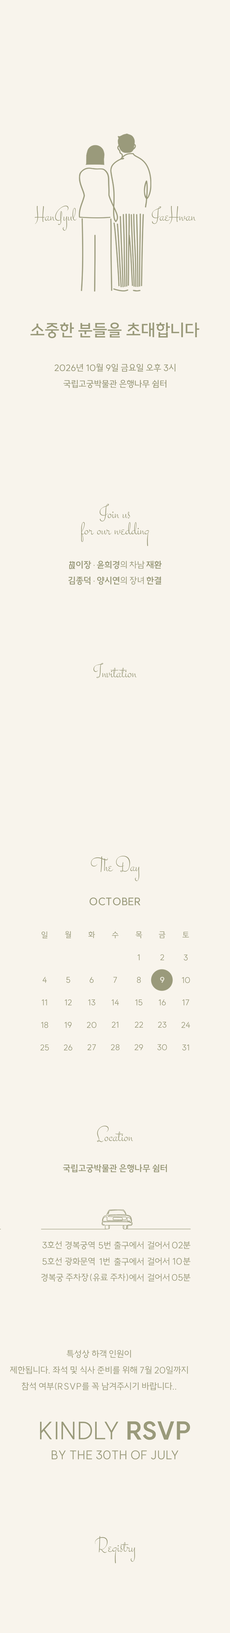
<style>
.page{position:relative;width:230px;height:1633px;background:#f8f4ec}
.page>*{position:absolute;margin:0}
.t1{font:20.3px "Stalemate-Regular";color:#9a9a7b}
.t2{font:17.1px "SUITE-SemiBold";color:#9a9a7b}
.t3{font:9px/16.2px "SUITE-Medium";color:#9a9a7b}
.t4{font:20.3px/16.2px "Stalemate-Regular";color:#9a9a7b}
.t5{font:9px/15.8px "SUITE-Bold";color:#9a9a7b}
.t6{font:8.6px/15.8px "WD-XLLubrifontSC-Regular";color:#9a9a7b}
.t7{font:7.2px/15.8px "WD-XLLubrifontSC-Regular";color:#9a9a7b}
.t8{font:9px/15.8px "SUITE-Regular";color:#9a9a7b}
.t9{font:10.4px "SUITE-SemiBold";color:#9a9a7b}
.t10{font:8.1px/22.5px "SUITE-Regular";color:#9a9a7b}
.t11{font:8.1px/22.5px "SUITE-ExtraBold";color:#9a9a7b}
.t12{font:9px "SUITE-Bold";color:#9a9a7b}
.t13{font:9px/16.2px "SUITE-Regular";color:#9a9a7b}
.t14{font:9px "SUITE-Regular";color:#9a9a7b}
.t15{font:24.3px "SUITE-Light";color:#9a9a7b}
.t16{font:24.3px "SUITE-ExtraBold";color:#9a9a7b}
.t17{font:12.2px "SUITE-Regular";color:#9a9a7b}
</style>
<div class="page">
<p class="t1" style="left:34px;top:206px;width:161px;height:25px">HanGyul                      JaeHwan</p>
<p class="t2" style="left:30px;top:322px;width:169px;height:16px">소중한 분들을 초대합니다</p>
<p class="t3" style="left:54px;top:364px;width:121px;height:24px;text-align:center">2026년 10월 9일 금요일 오후 3시<br>국립고궁박물관 은행나무 쉼터</p>
<p class="t4" style="left:81px;top:504px;width:68px;height:42px;text-align:center">Join us<br>for our wedding</p>
<p class="t5" style="left:68px;top:561px;width:93px;height:24px;text-align:right"><span class="t6">故 </span>이장<span class="t7">・</span>윤희경<span class="t8">의 차남 </span>재환<br>김종덕<span class="t7">・</span>양시연<span class="t8">의 장녀 </span>한결</p>
<p class="t1" style="left:93px;top:663px;width:43px;height:15px">Invitation</p>
<p class="t1" style="left:91px;top:856px;width:48px;height:25px">The Day</p>
<p class="t9" style="left:89px;top:897px;width:51px;height:8px">OCTOBER</p>
<p class="t10" style="left:40px;top:931px;width:9px;height:119px;text-align:center">일<br><br>4<br>11<br>18<br>25</p>
<p class="t10" style="left:64px;top:931px;width:8px;height:119px;text-align:center">월<br><br>5<br>12<br>19<br>26</p>
<p class="t10" style="left:87px;top:931px;width:9px;height:119px;text-align:center">화<br><br>6<br>13<br>20<br>27</p>
<p class="t10" style="left:111px;top:931px;width:8px;height:119px;text-align:center">수<br><br>7<br>14<br>21<br>28</p>
<p class="t10" style="left:134px;top:931px;width:9px;height:119px;text-align:center">목<br>1<br>8<br>15<br>22<br>29</p>
<p class="t10" style="left:157px;top:931px;width:10px;height:119px;text-align:center">금<br>2<br><span class="t11">9<br></span>16<br>23<br>30</p>
<p class="t10" style="left:181px;top:932px;width:9px;height:118px;text-align:center">토<br>3<br>10<br>17<br>24<br>31</p>
<p class="t1" style="left:97px;top:1125px;width:36px;height:17px">Location</p>
<p class="t12" style="left:63px;top:1164px;width:104px;height:8px">국립고궁박물관 은행나무 쉼터</p>
<p class="t13" style="left:41px;top:1241px;width:22px;height:41px;text-align:center">3호선<br>5호선<br>경복궁</p>
<p class="t13" style="left:65px;top:1241px;width:29px;height:24px;text-align:center">경복궁역<br>광화문역</p>
<p class="t13" style="left:98px;top:1241px;width:12px;height:24px;text-align:center">5번<br>1번</p>
<p class="t13" style="left:114px;top:1241px;width:29px;height:40px;text-align:right">출구에서<br>출구에서<br>에서</p>
<p class="t13" style="left:148px;top:1241px;width:21px;height:40px;text-align:center">걸어서<br>걸어서<br>걸어서</p>
<p class="t13" style="left:172px;top:1241px;width:18px;height:40px;text-align:right">02분<br>10 분<br>05분</p>
<p class="t14" style="left:66px;top:1273px;width:62px;height:8px">주차장 ( 유료 주차 )</p>
<p class="t13" style="left:10px;top:1350px;width:178px;height:40px;text-align:center">특성상 하객 인원이 <br>제한됩니다. 좌석 및 식사 준비를 위해 7월 20일까지 <br>참석 여부(RSVP를 꼭 남겨주시기 바랍니다..</p>
<p class="t15" style="left:40px;top:1421px;width:150px;height:19px">KINDLY <span class="t16">RSVP</span></p>
<p class="t17" style="left:52px;top:1450px;width:126px;height:9px">BY THE 30TH OF JULY</p>
<p class="t1" style="left:95px;top:1536px;width:40px;height:27px">Registry</p>
</div>
